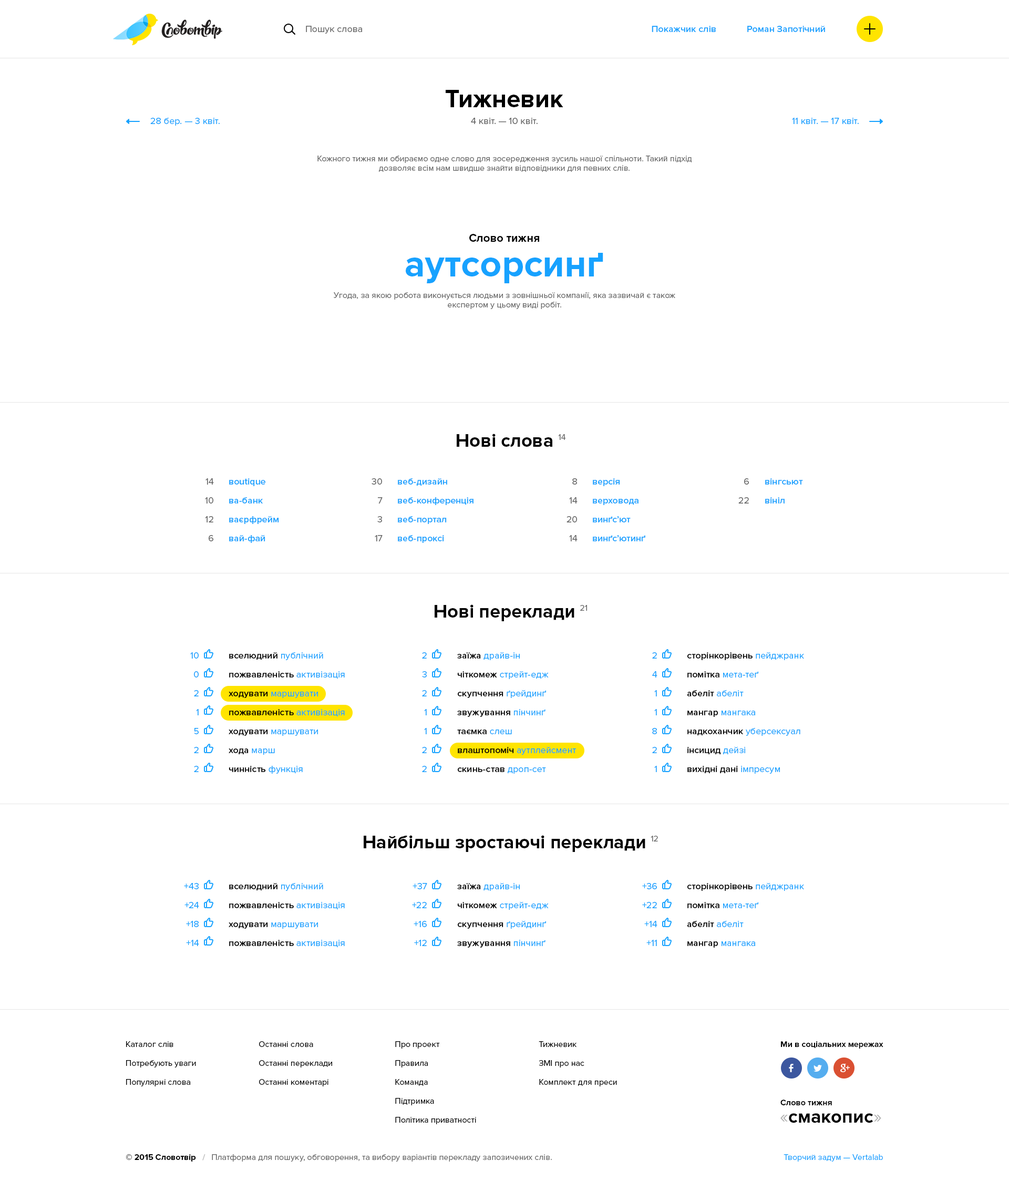
<style>
.page{position:relative;width:1009px;height:1181px;background:#ffffff}
.page>*{position:absolute;margin:0}
.t1{font:9.5px "ProximaNova-Regular";color:#666666}
.t2{font:9.5px "ProximaNova-Semibold";color:#17a2ff}
.t3{font:25.2px "ProximaNova-Bold";color:#000000}
.t4{font:9.5px "ProximaNova-Regular";color:#17a2ff}
.t5{font:8.4px/9.5px "ProximaNova-Regular";color:#666666}
.t6{font:11.6px "ProximaNova-Bold";color:#000000}
.t7{font:37.9px "ProximaNova-Bold";color:#17a2ff}
.t8{font:18.9px "ProximaNova-Bold";color:#000000}
.t9{font:8.4px "ProximaNova-Regular";color:#666666}
.t10{font:9.5px/18.9px "ProximaNova-Regular";color:#666666}
.t11{font:9.5px/18.9px "ProximaNova-Semibold";color:#17a2ff}
.t12{font:9.5px/18.9px "ProximaNova-Regular";color:#17a2ff}
.t13{font:9.5px/18.9px "ProximaNova-Semibold";color:#000000}
.t14{font:8.4px/18.9px "ProximaNova-Regular";color:#000000}
.t15{font:8.4px/18.9px "ProximaNova-Regular";color:#010101}
.t16{font:8.4px "ProximaNova-Bold";color:#010101}
.t17{font:18.9px "ProximaNova-Regular";color:#b3b3b3}
.t18{font:8.4px "ProximaNova-Bold";color:#000000}
.t19{font:8.4px "ProximaNova-Bold";color:#bfbfbf}
.t20{font:8.4px "ProximaNova-Regular";color:#17a2ff}
</style>
<div class="page">
<p class="t1" style="left:306px;top:26px;width:56px;height:8px">Пошук слова</p>
<p class="t2" style="left:652px;top:26px;width:64px;height:6px">Покажчик слів</p>
<p class="t2" style="left:748px;top:26px;width:77px;height:6px">Роман Запотічний</p>
<p class="t3" style="left:446px;top:90px;width:118px;height:17px">Тижневик</p>
<p class="t4" style="left:150px;top:118px;width:70px;height:8px">28 бер. — 3 квіт.</p>
<p class="t1" style="left:471px;top:118px;width:67px;height:6px">4 квіт. — 10 квіт.</p>
<p class="t4" style="left:792px;top:118px;width:67px;height:6px">11 квіт. — 17 квіт.</p>
<p class="t5" style="left:318px;top:156px;width:374px;height:16px;text-align:center">Кожного тижня ми обираємо одне слово для зосередження зусиль нашої спільноти. Такий підхід дозволяє всім нам швидше знайти відповідники для певних слів.</p>
<p class="t6" style="left:469px;top:234px;width:70px;height:8px">Слово тижня</p>
<p class="t7" style="left:406px;top:253px;width:198px;height:30px">аутсорсинґ</p>
<p class="t5" style="left:334px;top:292px;width:342px;height:17px;text-align:center">Угода, за якою робота виконується людьми з зовнішньої компанії, яка зазвичай є також експертом у цьому виді робіт.</p>
<p class="t8" style="left:457px;top:434px;width:96px;height:13px">Нові слова</p>
<p class="t9" style="left:558px;top:434px;width:8px;height:6px">14</p>
<p class="t10" style="left:205px;top:478px;width:9px;height:64px;text-align:right">14<br>10<br>12<br>6</p>
<p class="t11" style="left:229px;top:478px;width:50px;height:65px">вoutique<br>ва-банк<br>ваєрфрейм<br>вай-фай</p>
<p class="t10" style="left:372px;top:478px;width:11px;height:64px;text-align:right">30<br>7<br>3<br>17</p>
<p class="t11" style="left:398px;top:478px;width:76px;height:65px">веб-дизайн<br>веб-конференція<br>веб-портал<br>веб-проксі</p>
<p class="t10" style="left:567px;top:478px;width:11px;height:64px;text-align:right">8<br>14<br>20<br>14</p>
<p class="t11" style="left:593px;top:478px;width:53px;height:64px">версія<br>верховода<br>винґс’ют<br>винґс’ютинґ</p>
<p class="t10" style="left:739px;top:478px;width:10px;height:26px;text-align:right">6<br>22</p>
<p class="t11" style="left:765px;top:478px;width:38px;height:26px">вінгсьют<br>вініл</p>
<p class="t8" style="left:435px;top:605px;width:140px;height:16px">Нові переклади</p>
<p class="t9" style="left:580px;top:605px;width:7px;height:6px">21</p>
<p class="t12" style="left:190px;top:652px;width:9px;height:120px;text-align:right">10<br>0<br>2<br>1<br>5<br>2<br>2</p>
<p class="t13" style="left:229px;top:652px;width:116px;height:122px">вселюдний <span class="t12">публічний<br></span>пожвавленість <span class="t12">активізація<br></span>ходувати <span class="t12">маршувати<br></span>пожвавленість <span class="t12">активізація<br></span>ходувати <span class="t12">маршувати<br></span>хода <span class="t12">марш<br></span>чинність <span class="t12">функція</span></p>
<p class="t12" style="left:422px;top:652px;width:5px;height:120px;text-align:right">2<br>3<br>2<br>1<br>1<br>2<br>2</p>
<p class="t12" style="left:457px;top:652px;width:120px;height:122px"><span class="t13">заїжа </span>драйв-ін<br><span class="t13">чіткомеж </span>стрейт-едж<br><span class="t13">скупчення </span>ґрейдинґ<br><span class="t13">звужування </span>пінчинґ<br><span class="t13">таємка </span>слеш<br><span class="t13">влаштопоміч </span>аутплейсмент<br><span class="t13">скинь-став </span>дроп-сет</p>
<p class="t12" style="left:652px;top:652px;width:6px;height:120px;text-align:right">2<br>4<br>1<br>1<br>8<br>2<br>1</p>
<p class="t13" style="left:687px;top:652px;width:117px;height:122px">сторінкорівень <span class="t12">пейджранк<br></span>помітка <span class="t12">мета-теґ<br></span>абеліт <span class="t12">абеліт<br></span>мангар <span class="t12">мангака<br></span>надкоханчик <span class="t12">уберсексуал<br></span>інсицид <span class="t12">дейзі<br></span>вихідні дані <span class="t12">імпресум</span></p>
<p class="t8" style="left:364px;top:835px;width:282px;height:17px">Найбільш зростаючі переклади</p>
<p class="t9" style="left:651px;top:836px;width:7px;height:6px">12</p>
<p class="t12" style="left:184px;top:883px;width:15px;height:63px;text-align:right">+43<br>+24<br>+18<br>+14</p>
<p class="t13" style="left:229px;top:883px;width:116px;height:65px">вселюдний <span class="t12">публічний<br></span>пожвавленість <span class="t12">активізація<br></span>ходувати <span class="t12">маршувати<br></span>пожвавленість <span class="t12">активізація</span></p>
<p class="t12" style="left:412px;top:883px;width:15px;height:63px;text-align:right">+37<br>+22<br>+16<br>+12</p>
<p class="t12" style="left:457px;top:883px;width:92px;height:65px"><span class="t13">заїжа </span>драйв-ін<br><span class="t13">чіткомеж </span>стрейт-едж<br><span class="t13">скупчення </span>ґрейдинґ<br><span class="t13">звужування </span>пінчинґ</p>
<p class="t12" style="left:642px;top:883px;width:16px;height:63px;text-align:right">+36<br>+22<br>+14<br>+11</p>
<p class="t13" style="left:687px;top:883px;width:117px;height:65px">сторінкорівень <span class="t12">пейджранк<br></span>помітка <span class="t12">мета-теґ<br></span>абеліт <span class="t12">абеліт<br></span>мангар <span class="t12">мангака</span></p>
<p class="t14" style="left:126px;top:1041px;width:70px;height:46px">Каталог слів<br>Потребують уваги<br>Популярні слова</p>
<p class="t14" style="left:259px;top:1041px;width:73px;height:46px">Останні слова<br>Останні переклади<br>Останні коментарі</p>
<p class="t14" style="left:395px;top:1041px;width:81px;height:84px">Про проект<br>Правила<br>Команда<br>Підтримка<br>Політика приватності</p>
<p class="t15" style="left:539px;top:1041px;width:78px;height:46px">Тижневик<br>ЗМІ про нас<br>Комплект для преси</p>
<p class="t16" style="left:781px;top:1041px;width:103px;height:8px">Ми в соціальних мережах</p>
<p class="t16" style="left:781px;top:1100px;width:51px;height:6px">Слово тижня</p>
<p class="t8" style="left:781px;top:1114px;width:101px;height:9px"><span class="t17">«</span>смакопис<span class="t17">»</span></p>
<p class="t9" style="left:126px;top:1155px;width:426px;height:7px"><span class="t18">© 2015 Словотвір   </span><span class="t19">/   </span>Платформа для пошуку, обговорення, та вибору варіантів перекладу запозичених слів.</p>
<p class="t20" style="left:784px;top:1155px;width:99px;height:7px">Творчий задум — Vertalab</p>
</div>
